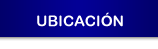
<style>
.page{position:relative;width:158px;height:49px}
.page>*{position:absolute;margin:0}
.t1{font:15px "ArialRoundedMTBold";color:#ffffff}
</style>
<div class="page">
<p class="t1" style="left:37px;top:12px;width:86px;height:15px">UBICACIÓN</p>
</div>
